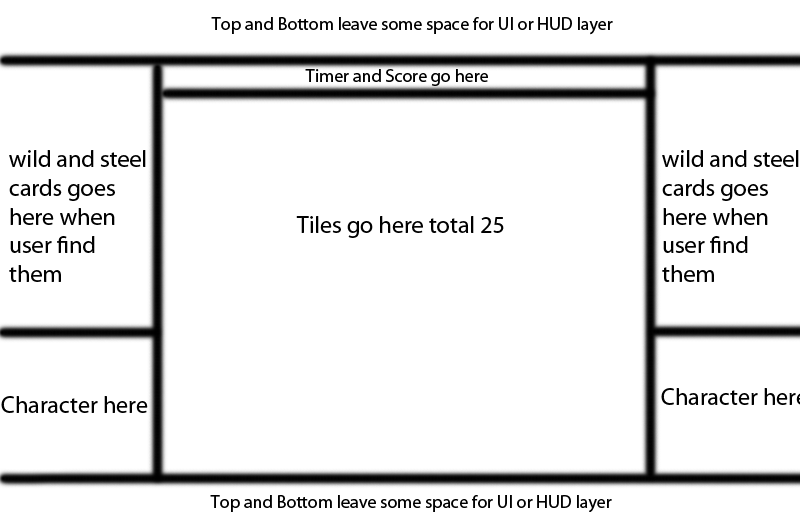
<style>
.page{position:relative;width:800px;height:512px;background:#ffffff}
.page>*{position:absolute;margin:0}
.t1{font:18px "MyriadPro-Regular";color:#000000}
.t2{font:24px "MyriadPro-Regular";color:#000000}
</style>
<div class="page">
<p class="t1" style="left:211px;top:17px;width:402px;height:18px">Top and Bottom leave some space for UI or HUD layer</p>
<p class="t1" style="left:305px;top:69px;width:183px;height:17px">Timer and Score go here</p>
<p class="t2" style="left:9px;top:150px;width:137px;height:132px">wild and steel <br>cards goes <br>here when <br>user find <br>them</p>
<p class="t2" style="left:662px;top:150px;width:137px;height:132px">wild and steel <br>cards goes <br>here when <br>user find <br>them</p>
<p class="t2" style="left:296px;top:216px;width:208px;height:22px">Tiles go here total 25</p>
<p class="t2" style="left:1px;top:396px;width:147px;height:17px">Character here</p>
<p class="t1" style="left:210px;top:495px;width:402px;height:18px">Top and Bottom leave some space for UI or HUD layer</p>
</div>
